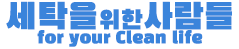
<style>
.page{position:relative;width:239px;height:49px;background:#ffffff}
.page>*{position:absolute;margin:0}
.t1{font:36.1px "BlackHanSans-Regular";color:#3a84db;font-weight:bold}
.t2{font:26.1px "BlackHanSans-Regular";color:#3a84db;font-weight:bold}
.t3{font:16.3px "BlackHanSans-Regular";color:#3a84db;font-weight:bold}
</style>
<div class="page">
<p class="t1" style="left:6px;top:1px;width:226px;height:29px">세탁을<span class="t2">위한</span>사람들</p>
<p class="t3" style="left:37px;top:30px;width:166px;height:17px">for your Clean life</p>
</div>
